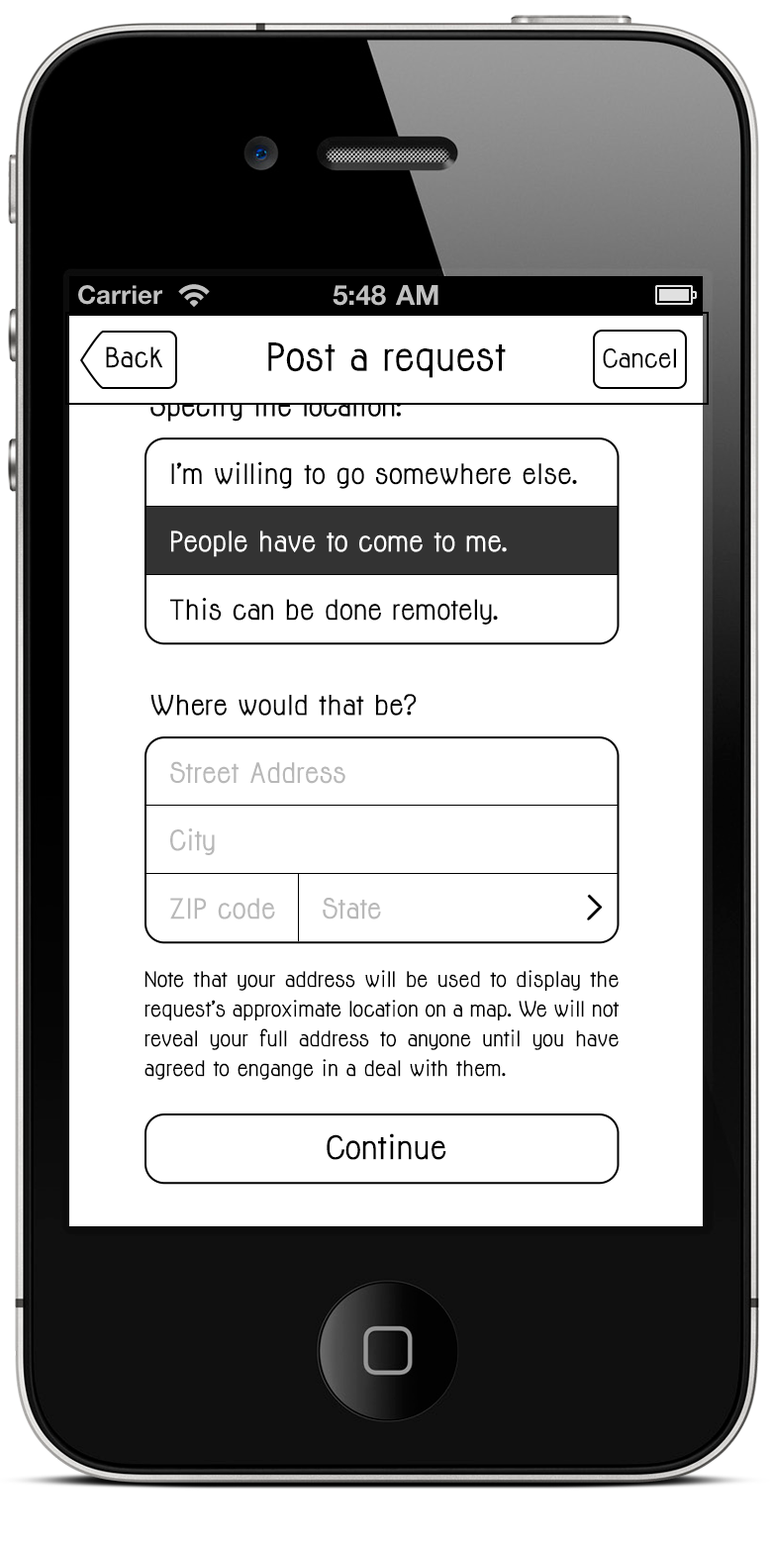
<style>
.page{position:relative;width:772px;height:1545px;background:#ffffff}
.page>*{position:absolute;margin:0}
.t1{font:25.7px "Jolly-Bold";color:#000000}
.t2{font:35.6px "Jolly-Bold";color:#000000}
.t3{font:23.8px "Jolly-Bold";color:#000000}
.t4{font:25.7px "Jolly-Bold";color:#ffffff}
.t5{font:25.5px "Jolly-Bold";color:#000000}
.t6{font:25.7px "Jolly-Bold";color:#b8b8b8}
.t7{font:19.8px/29.7px "Jolly-Bold";letter-spacing:-0.01em;color:#000000}
.t8{font:29.8px "Jolly-Bold";color:#000000}
</style>
<div class="page">
<p class="t1" style="left:106px;top:346px;width:57px;height:22px">Back</p>
<p class="t2" style="left:268px;top:342px;width:238px;height:36px">Post a request</p>
<p class="t3" style="left:603px;top:348px;width:73px;height:20px">Cancel</p>
<p class="t1" style="left:171px;top:461px;width:406px;height:28px">I’m willing to go somewhere else.</p>
<p class="t4" style="left:171px;top:530px;width:336px;height:27px">People have to come to me.</p>
<p class="t1" style="left:170px;top:598px;width:328px;height:26px">This can be done remotely.</p>
<p class="t5" style="left:150px;top:694px;width:267px;height:22px">Where would that be?</p>
<p class="t6" style="left:170px;top:761px;width:175px;height:23px">Street Address</p>
<p class="t6" style="left:170px;top:828px;width:45px;height:27px">City</p>
<p class="t6" style="left:170px;top:898px;width:105px;height:21px">ZIP code</p>
<p class="t6" style="left:323px;top:898px;width:58px;height:21px">State</p>
<p class="t7" style="left:144px;top:970px;width:475px;height:110px;text-align:justify">Note that your address will be used to display the   request’s approximate location on a map. We will not reveal your full address to anyone until you have agreed to engange in a deal with them.</p>
<p class="t8" style="left:327px;top:1133px;width:119px;height:27px">Continue</p>
</div>
